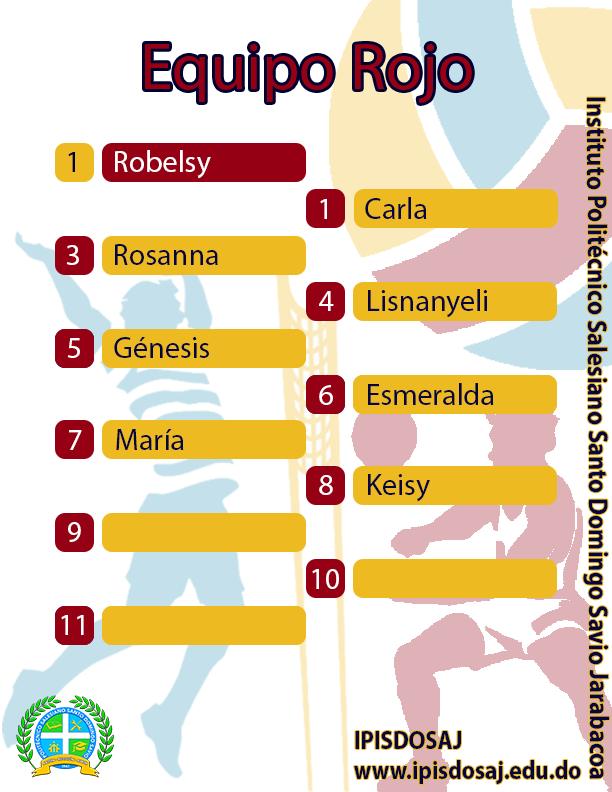
<style>
.page{position:relative;width:612px;height:792px;background:#ffffff}
.page>*{position:absolute;margin:0}
.t1{font:27.2px "MyriadPro-Bold";color:#06063f;scale:0.9 1}
.t2{font:30px "MyriadPro-Regular";color:#ffffff}
.t3{font:30px "MyriadPro-Regular";color:#000030}
.t4{font:30px "MyriadPro-Regular";color:#06063f}
.t5{font:25.6px "MyriadPro-Bold";color:#06063f;scale:0.9 1}
</style>
<div class="page">
<p class="t1" style="left:583px;top:97px;width:27px;height:682px;rotate:90deg">Instituto Politécnico Salesiano Santo Domingo Savio Jarabacoa</p>
<p class="t2" style="left:68px;top:150px;width:143px;height:29px"><span class="t3">1     </span>Robelsy</p>
<p class="t4" style="left:320px;top:197px;width:107px;height:22px"><span class="t2">1    </span> Carla</p>
<p class="t4" style="left:66px;top:244px;width:152px;height:21px"><span class="t2">3    </span> Rosanna</p>
<p class="t4" style="left:319px;top:289px;width:168px;height:29px"><span class="t2">4     </span>Lisnanyeli</p>
<p class="t4" style="left:67px;top:337px;width:142px;height:21px"><span class="t2">5    </span> Génesis</p>
<p class="t4" style="left:319px;top:383px;width:175px;height:22px"><span class="t2">6     </span>Esmeralda</p>
<p class="t4" style="left:69px;top:429px;width:115px;height:21px"><span class="t2">7    </span> María</p>
<p class="t4" style="left:319px;top:474px;width:111px;height:28px"><span class="t2">8     </span>Keisy</p>
<p class="t2" style="left:68px;top:522px;width:13px;height:20px">9</p>
<p class="t2" style="left:312px;top:569px;width:27px;height:20px">10</p>
<p class="t2" style="left:61px;top:615px;width:23px;height:20px">11</p>
<p class="t5" style="left:354px;top:731px;width:227px;height:53px">IPISDOSAJ<br>www.ipisdosaj.edu.do</p>
</div>
